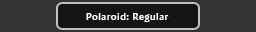
<style>
.page{position:relative;width:256px;height:32px;background:#333333}
.page>*{position:absolute;margin:0}
.t1{font:10px "AmiraParadiso";letter-spacing:0.05em;color:#ffffff}
</style>
<div class="page">
<p class="t1" style="left:86px;top:13px;width:83px;height:9px">Polaroid: Regular</p>
</div>
